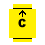
<style>
.page{position:relative;width:45px;height:45px;background:#ffffff}
.page>*{position:absolute;margin:0}
.t1{font:11px "Arial-Black";color:#000000}
</style>
<div class="page">
<p class="t1" style="left:18px;top:18px;width:8px;height:10px">C</p>
</div>
